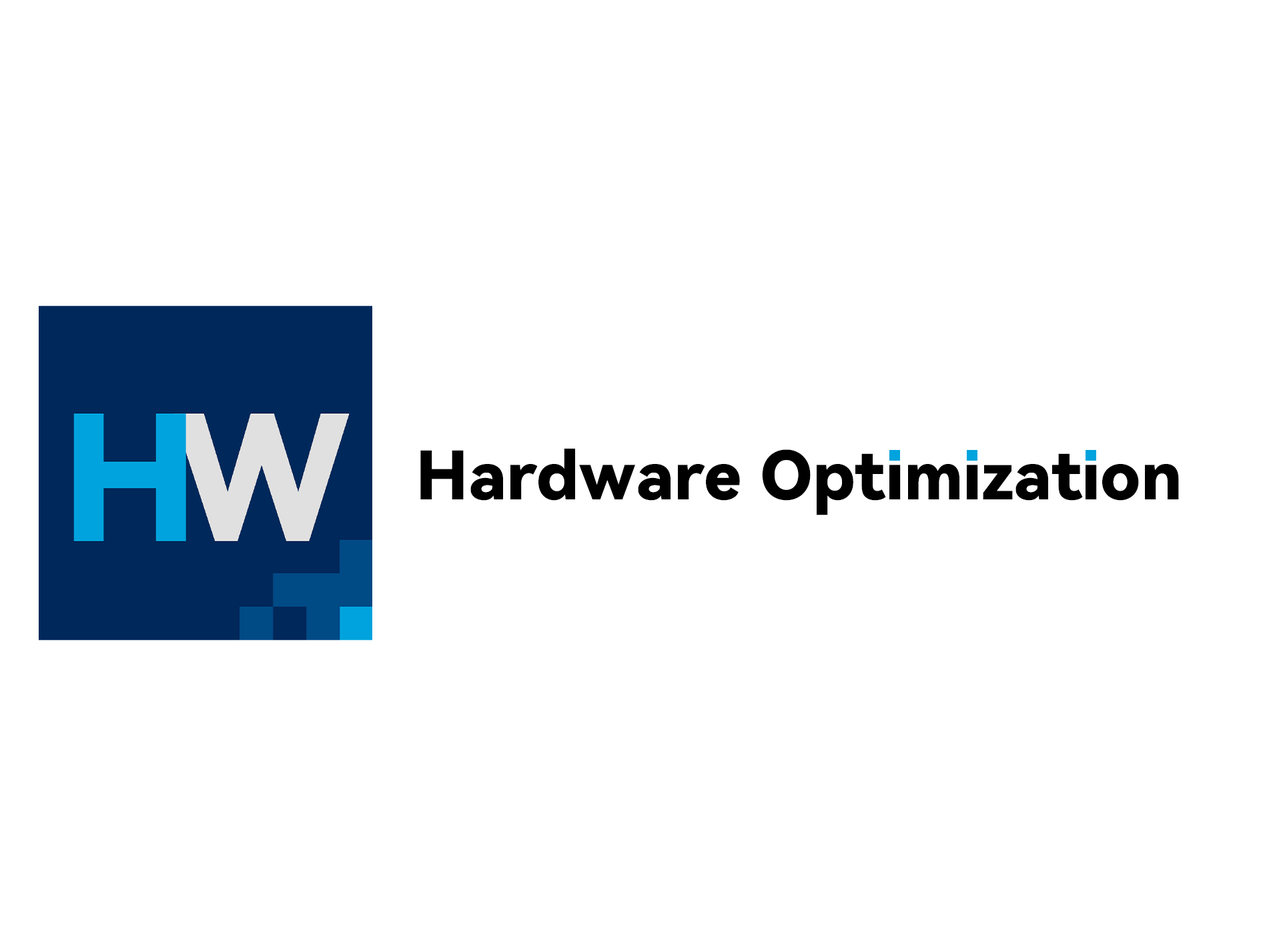
<style>
.page{position:relative;width:1261px;height:946px;background:#ffffff}
.page>*{position:absolute;margin:0}
.t1{font:66.7px "HarmonyOS_Sans_SC_Black";color:#000000}
</style>
<div class="page">
<p class="t1" style="left:420px;top:448px;width:759px;height:67px">Hardware Optimization</p>
</div>
